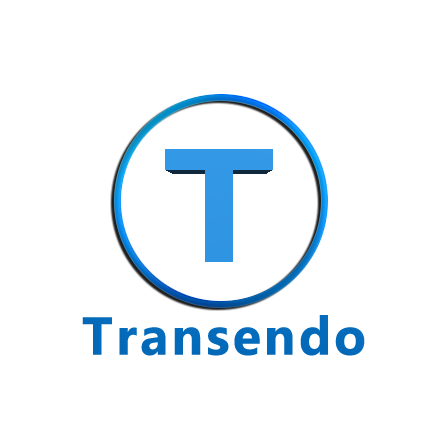
<style>
.page{position:relative;width:436px;height:436px;background:#ffffff}
.page>*{position:absolute;margin:0}
.t1{font:53.4px "MyanmarText-Bold";letter-spacing:0.06em;color:#036bbb}
</style>
<div class="page">
<p class="t1" style="left:82px;top:315px;width:283px;height:41px">Transendo</p>
</div>
